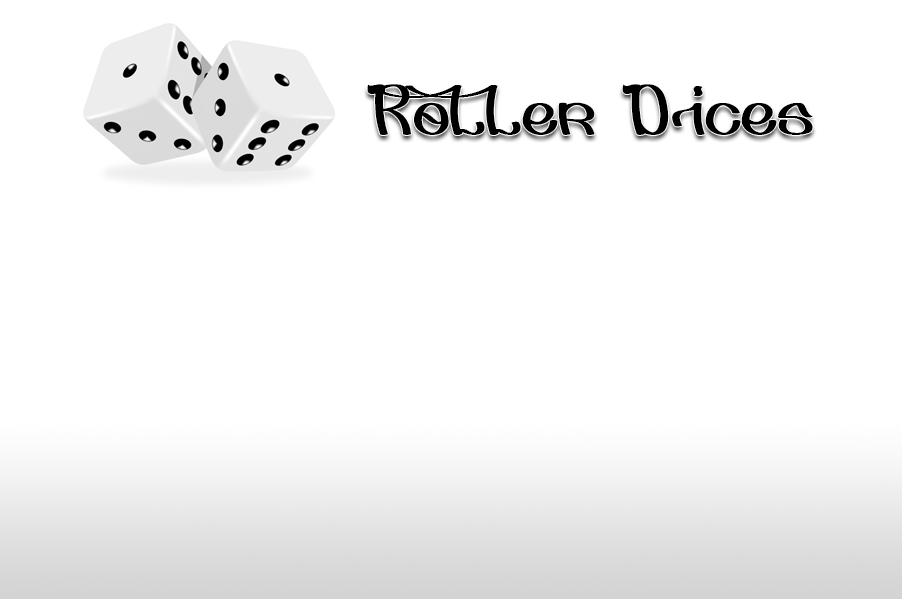
<style>
.page{position:relative;width:902px;height:599px;background:#ffffff}
.page>*{position:absolute;margin:0}
.t1{font:72px "DjahBeat";color:#000000}
</style>
<div class="page">
<p class="t1" style="left:367px;top:84px;width:446px;height:51px">Roller Dices</p>
</div>
